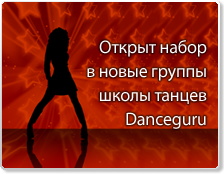
<style>
.page{position:relative;width:224px;height:174px}
.page>*{position:absolute;margin:0}
.t1{font:18px/24px "MyriadPro-Regular";letter-spacing:-0.01em;color:#ffffff}
</style>
<div class="page">
<p class="t1" style="left:87px;top:40px;width:120px;height:89px;text-align:right">Открыт набор<br>в новые группы<br>школы танцев<br>Danceguru</p>
</div>
